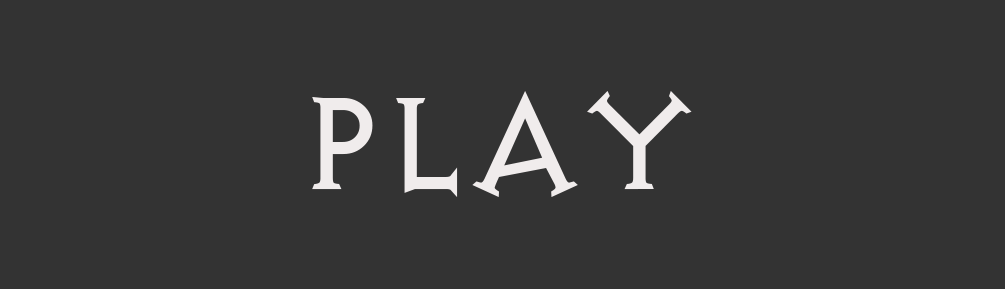
<style>
.page{position:relative;width:1005px;height:289px;background:#333333}
.page>*{position:absolute;margin:0}
.t1{font:150px "AvQest";color:#f0ecec}
</style>
<div class="page">
<p class="t1" style="left:312px;top:91px;width:380px;height:106px">PLAY</p>
</div>
